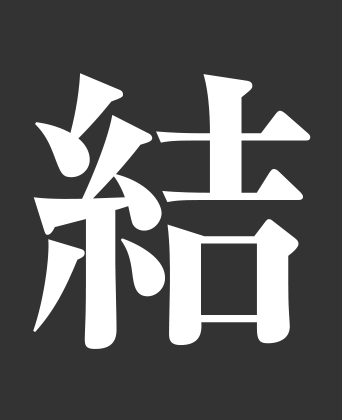
<style>
.page{position:relative;width:342px;height:420px;background:#333333}
.page>*{position:absolute;margin:0}
.t1{font:300px "RyuminPr6N-ExBold";color:#ffffff}
</style>
<div class="page">
<p class="t1" style="left:33px;top:73px;width:278px;height:276px">結</p>
</div>
